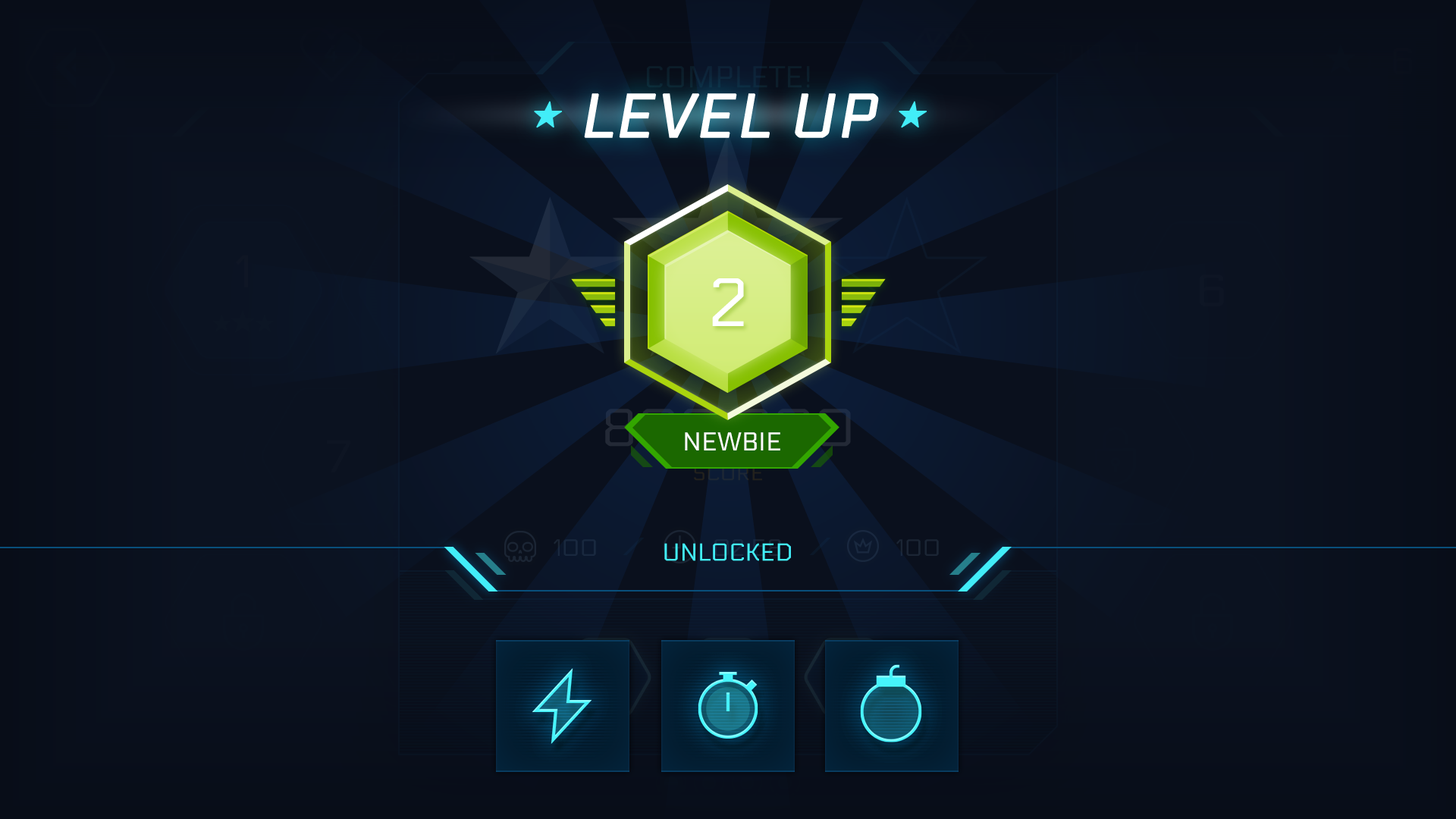
<style>
.page{position:relative;width:1456px;height:819px}
.page>*{position:absolute;margin:0}
.t1{font:60.8px "Electrolize-Regular";letter-spacing:0.02em;color:#ffffff;text-transform:uppercase;font-weight:bold;font-style:italic}
.t2{font:30.4px "NanumSquareOTFR";letter-spacing:0.02em;color:#42edf8;text-transform:uppercase;font-weight:bold;font-style:italic}
.t3{font:68.2px "Electrolize-Regular";color:#ffffff}
.t4{font:25.8px "Electrolize-Regular";color:#ffffff}
.t5{font:24.3px "Electrolize-Regular";color:#42edf8;text-transform:uppercase}
</style>
<div class="page">
<p class="t1" style="left:534px;top:93px;width:393px;height:45px"><span class="t2">★ </span>LEVEL UP <span class="t2">★</span></p>
<p class="t3" style="left:712px;top:278px;width:32px;height:48px">2</p>
<p class="t4" style="left:685px;top:432px;width:95px;height:18px">NEWBIE</p>
<p class="t5" style="left:664px;top:543px;width:127px;height:18px">UNLOCKED</p>
</div>
